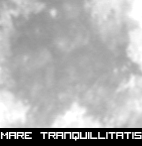
<style>
.page{position:relative;width:142px;height:146px}
.page>*{position:absolute;margin:0}
.t1{font:14px "VisitorTT1BRK";letter-spacing:-0.035em;color:#ffffff}
</style>
<div class="page">
<p class="t1" style="left:0px;top:132px;width:142px;height:9px">Mare Tranquillitatis</p>
</div>
